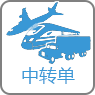
<style>
.page{position:relative;width:95px;height:95px;background:#ffffff}
.page>*{position:absolute;margin:0}
.t1{font:18px "MicrosoftYaHei";color:#3998d6}
</style>
<div class="page">
<p class="t1" style="left:22px;top:67px;width:53px;height:17px">中转单</p>
</div>
